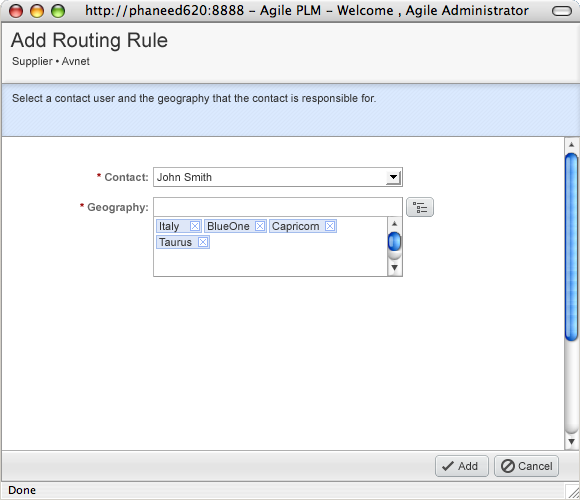
<style>
.page{position:relative;width:580px;height:500px;background:#ffffff}
.page>*{position:absolute;margin:0}
.t1{font:20px "ArialMT";color:#333333}
.t2{font:11px "ArialMT";color:#333333}
.t3{font:11px "Arial-BoldMT";color:#666666}
.t4{font:11px "Arial-BoldMT";color:#990000}
.t5{font:11px "ArialMT";color:#666666}
</style>
<div class="page">
<p class="t1" style="left:10px;top:32px;width:158px;height:20px">Add Routing Rule</p>
<p class="t2" style="left:12px;top:57px;width:78px;height:11px">Supplier • Avnet</p>
<p class="t2" style="left:12px;top:94px;width:364px;height:11px">Select a contact user and the geography that the contact is responsible for.</p>
<p class="t3" style="left:97px;top:173px;width:51px;height:8px"><span class="t4">*</span> Contact:</p>
<p class="t2" style="left:157px;top:173px;width:55px;height:8px">John Smith</p>
<p class="t3" style="left:80px;top:203px;width:68px;height:11px"><span class="t5"> </span><span class="t4">* </span>Geography:</p>
<p class="t2" style="left:160px;top:222px;width:19px;height:11px">Italy</p>
<p class="t2" style="left:458px;top:462px;width:20px;height:8px">Add</p>
<p class="t2" style="left:518px;top:462px;width:34px;height:8px">Cancel</p>
</div>
